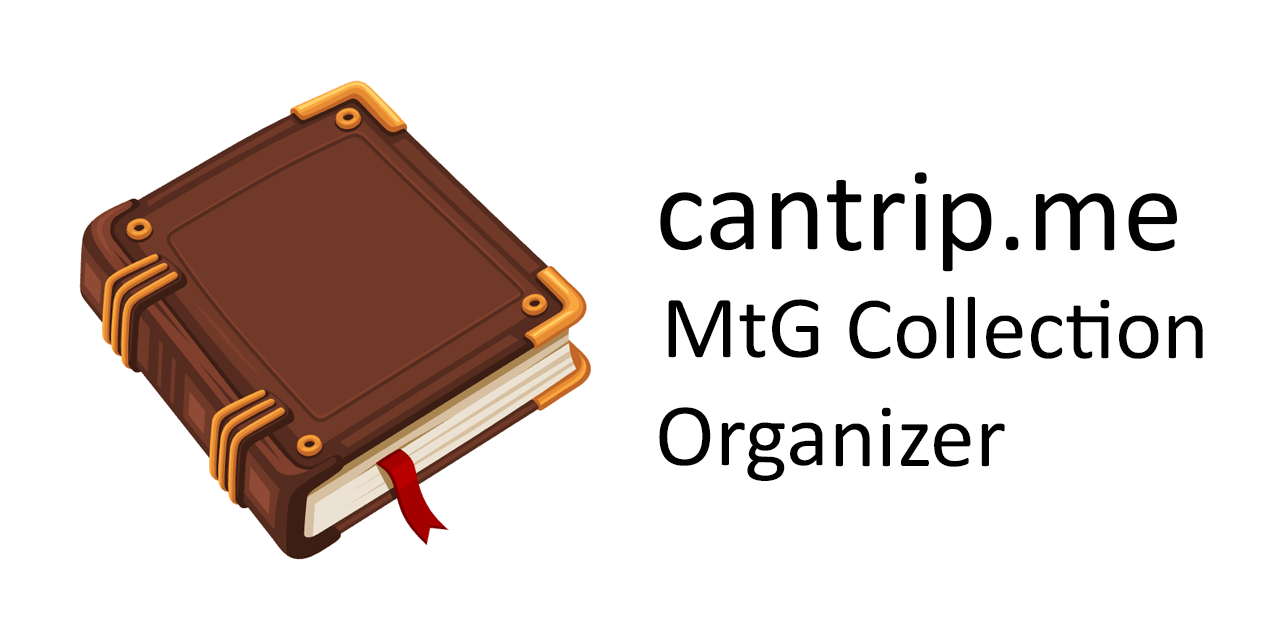
<style>
.page{position:relative;width:1280px;height:640px;background:#ffffff}
.page>*{position:absolute;margin:0}
.t1{font:90px "Calibri";color:#010101}
.t2{font:120px "Calibri";color:#010101}
</style>
<div class="page">
<p class="t1" style="left:659px;top:172px;width:544px;height:309px"><span class="t2">cantrip.me<br></span>MtG Collection<br>Organizer</p>
</div>
